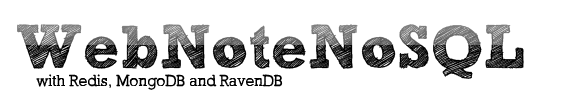
<style>
.page{position:relative;width:562px;height:104px;background:#ffffff}
.page>*{position:absolute;margin:0}
.t1{font:61.3px "SketchBlock-Bold"}
.t2{font:16px "SketchBlock-Light";color:#000000}
</style>
<div class="page">
<p class="t1" style="left:17px;top:24px;width:507px;height:55px">WebNoteNoSQL</p>
<p class="t2" style="left:36px;top:74px;width:247px;height:16px">with Redis, MongoDB and RavenDB</p>
</div>
